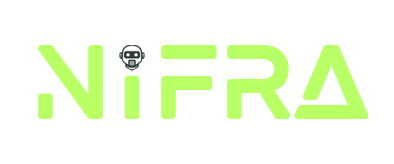
<style>
.page{position:relative;width:394px;height:164px;background:#ffffff}
.page>*{position:absolute;margin:0}
.t1{font:100px "Gaoel";color:#b9ff66}
.t2{font:58px "Gaoel";color:#b9ff66;scale:1.69 1}
</style>
<div class="page">
<p class="t1" style="left:38px;top:45px;width:331px;height:74px">N  FRA</p>
<p class="t2" style="left:124px;top:76px;width:16px;height:43px">i</p>
</div>
